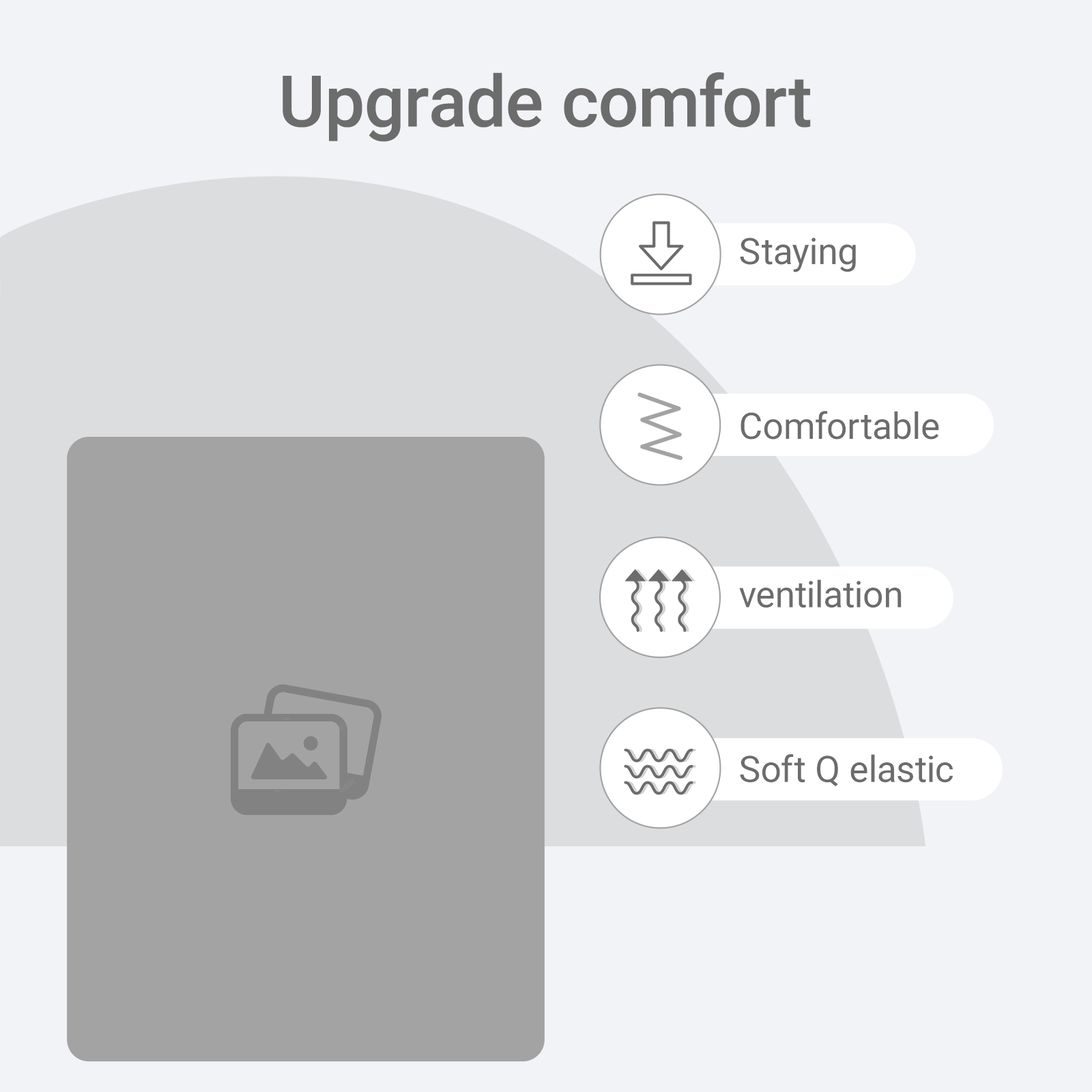
<style>
.page{position:relative;width:1092px;height:1092px;background:#f2f3f6}
.page>*{position:absolute;margin:0}
.t1{font:71.3px "Roboto-Medium";color:#6c6c6c}
.t2{font:36.5px "Roboto-Regular";color:#6c6c6c}
</style>
<div class="page">
<p class="t1" style="left:283px;top:72px;width:528px;height:70px">Upgrade comfort</p>
<p class="t2" style="left:740px;top:238px;width:116px;height:34px">Staying</p>
<p class="t2" style="left:741px;top:411px;width:198px;height:29px">Comfortable</p>
<p class="t2" style="left:739px;top:579px;width:163px;height:29px">ventilation</p>
<p class="t2" style="left:740px;top:754px;width:213px;height:33px">Soft Q elastic</p>
</div>
